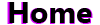
<style>
.page{position:relative;width:100px;height:25px;background:#ffffff}
.page>*{position:absolute;margin:0}
.t1{font:31px "Ebrima-Bold";color:#000000}
.t2{font:30px "Ebrima-Bold";color:#000000}
</style>
<div class="page">
<p class="t1" style="left:7px;top:2px;width:86px;height:22px">Home</p>
<p class="t2" style="left:9px;top:2px;width:83px;height:21px">Home</p>
</div>
